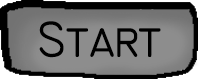
<style>
.page{position:relative;width:200px;height:80px;background:#8d8d8d}
.page>*{position:absolute;margin:0}
.t1{font:50.8px "Technic";letter-spacing:-0.05em;color:#000000}
</style>
<div class="page">
<p class="t1" style="left:39px;top:21px;width:122px;height:37px">Start</p>
</div>
